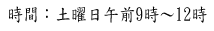
<style>
.page{position:relative;width:214px;height:31px;background:#ffffff}
.page>*{position:absolute;margin:0}
.t1{font:18px "DFKaiShu-SB-Estd-BF";color:#060606;scale:0.89 1}
</style>
<div class="page">
<p class="t1" style="left:9px;top:6px;width:198px;height:17px">時間：土曜日午前9時〜12時</p>
</div>
